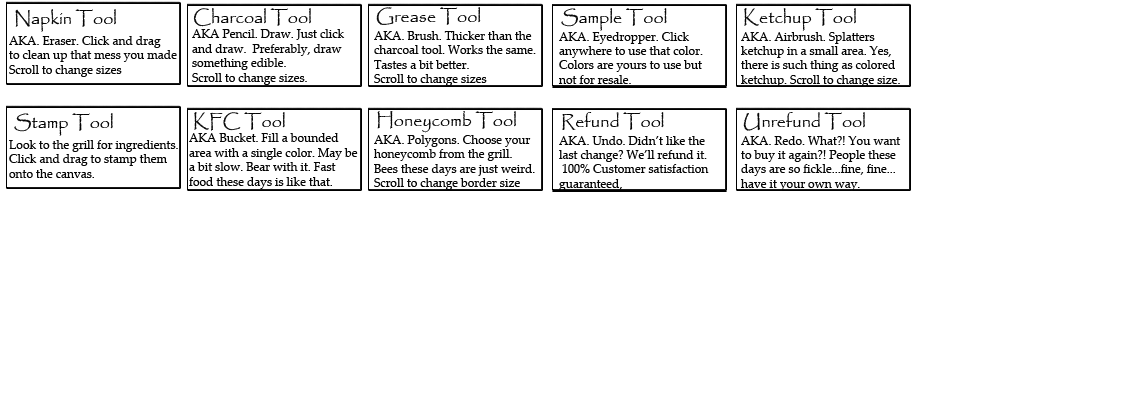
<style>
.page{position:relative;width:1125px;height:400px;background:#ffffff}
.page>*{position:absolute;margin:0}
.t1{font:18px "Papyrus-Regular";color:#040404}
.t2{font:12px "PalatinoLinotype-Roman";color:#040404}
.t3{font:14px "Papyrus-Regular";color:#040404}
</style>
<div class="page">
<p class="t1" style="left:15px;top:9px;width:101px;height:23px">Napkin Tool</p>
<p class="t1" style="left:193px;top:8px;width:118px;height:19px">Charcoal Tool</p>
<p class="t1" style="left:376px;top:7px;width:105px;height:18px">Grease Tool</p>
<p class="t1" style="left:561px;top:8px;width:106px;height:23px">Sample Tool</p>
<p class="t1" style="left:744px;top:8px;width:112px;height:23px">Ketchup Tool</p>
<p class="t2" style="left:192px;top:29px;width:153px;height:56px"><span class="t3"><br></span>AKA Pencil. Draw. Just click <br>and draw.  Preferably, draw <br>something edible.<br>Scroll to change sizes.</p>
<p class="t2" style="left:9px;top:36px;width:168px;height:41px">AKA. Eraser. Click and drag<br>to clean up that mess you made<br>Scroll to change sizes</p>
<p class="t2" style="left:374px;top:31px;width:162px;height:55px">AKA. Brush. Thicker than the<br>charcoal tool. Works the same.<br>Tastes a bit better.<br>Scroll to change sizes</p>
<p class="t2" style="left:559px;top:32px;width:144px;height:52px">AKA. Eyedropper. Click <br>anywhere to use that color.<br>Colors are yours to use but<br>not for resale.</p>
<p class="t2" style="left:741px;top:32px;width:159px;height:55px">AKA. Airbrush. Splatters <br>ketchup in a small area. Yes, <br>there is such thing as colored<br>ketchup. Scroll to change size.</p>
<p class="t1" style="left:14px;top:113px;width:99px;height:23px">Stamp Tool</p>
<p class="t1" style="left:194px;top:112px;width:91px;height:19px">KFC Tool</p>
<p class="t1" style="left:377px;top:111px;width:139px;height:22px">Honeycomb Tool</p>
<p class="t1" style="left:562px;top:112px;width:102px;height:18px">Refund Tool</p>
<p class="t1" style="left:743px;top:112px;width:122px;height:19px">Unrefund Tool</p>
<p class="t2" style="left:189px;top:133px;width:169px;height:56px"><span class="t3"><br></span>AKA Bucket. Fill a bounded<br>area with a single color. May be <br>a bit slow. Bear with it. Fast<br>food these days is like that.</p>
<p class="t2" style="left:374px;top:135px;width:161px;height:55px">AKA. Polygons. Choose your<br>honeycomb from the grill.<br>Bees these days are just weird.<br>Scroll to change border size</p>
<p class="t2" style="left:559px;top:136px;width:150px;height:55px">AKA. Undo. Didn’t like the <br>last change? We’ll refund it.<br> 100% Customer satisfaction <br>guaranteed,</p>
<p class="t2" style="left:741px;top:136px;width:160px;height:55px">AKA. Redo. What?! You want<br>to buy it again?! People these<br>days are so fickle...fine, fine...<br>have it your own way.</p>
<p class="t2" style="left:9px;top:140px;width:169px;height:38px">Look to the grill for ingredients.<br>Click and drag to stamp them<br>onto the canvas.</p>
</div>
